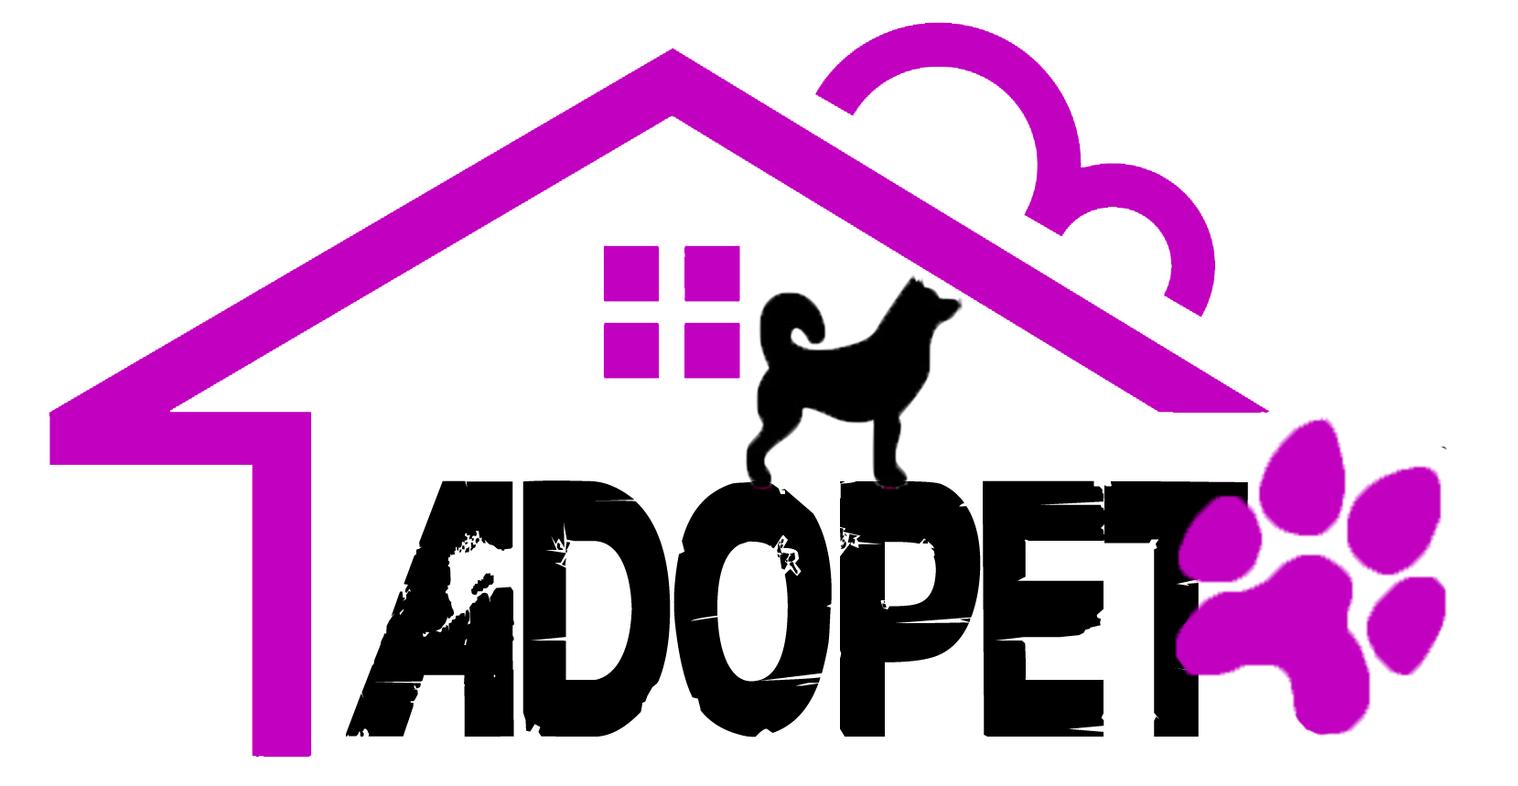
<style>
.page{position:relative;width:1518px;height:786px;background:#ffffff}
.page>*{position:absolute;margin:0}
.t1{font:319.3px "FarCryExtraBold";color:#000000;scale:0.71 1}
</style>
<div class="page">
<p class="t1" style="left:346px;top:480px;width:902px;height:257px">ADOPET</p>
</div>
